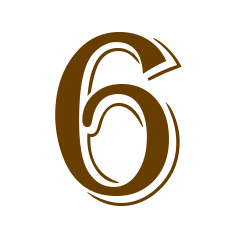
<style>
.page{position:relative;width:240px;height:240px;background:#ffffff}
.page>*{position:absolute;margin:0}
.t1{font:250px "Algerian";color:#683e00}
</style>
<div class="page">
<p class="t1" style="left:55px;top:32px;width:127px;height:174px">6</p>
</div>
